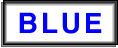
<style>
.page{position:relative;width:118px;height:48px;background:#ffffff}
.page>*{position:absolute;margin:0}
.t1{font:28px "Helvetica-Bold";letter-spacing:0.1em;color:#0000ff}
</style>
<div class="page">
<p class="t1" style="left:19px;top:12px;width:83px;height:22px">BLUE</p>
</div>
